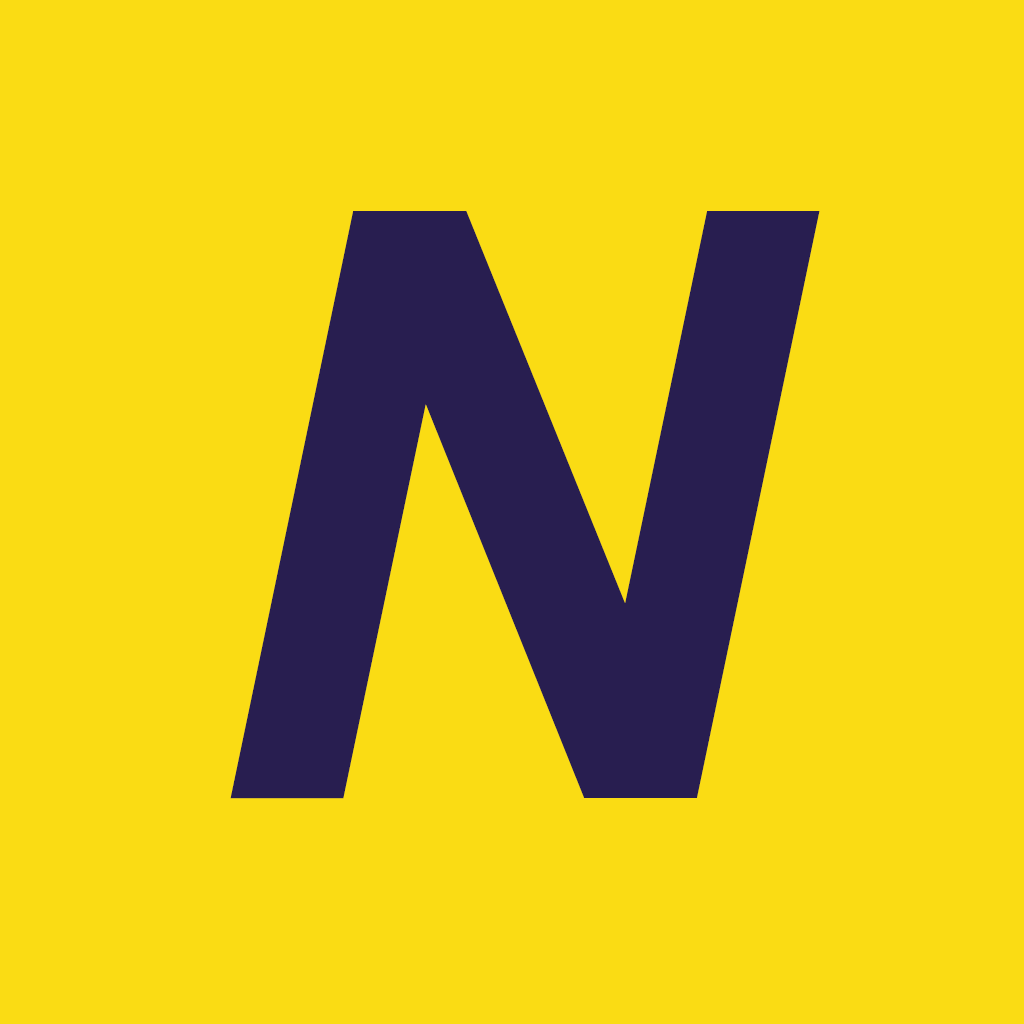
<style>
.page{position:relative;width:1024px;height:1024px;background:#fadc14}
.page>*{position:absolute;margin:0}
.t1{font:820px "Arial-BoldItalicMT";color:#281e50}
</style>
<div class="page">
<p class="t1" style="left:230px;top:211px;width:590px;height:588px">N</p>
</div>
